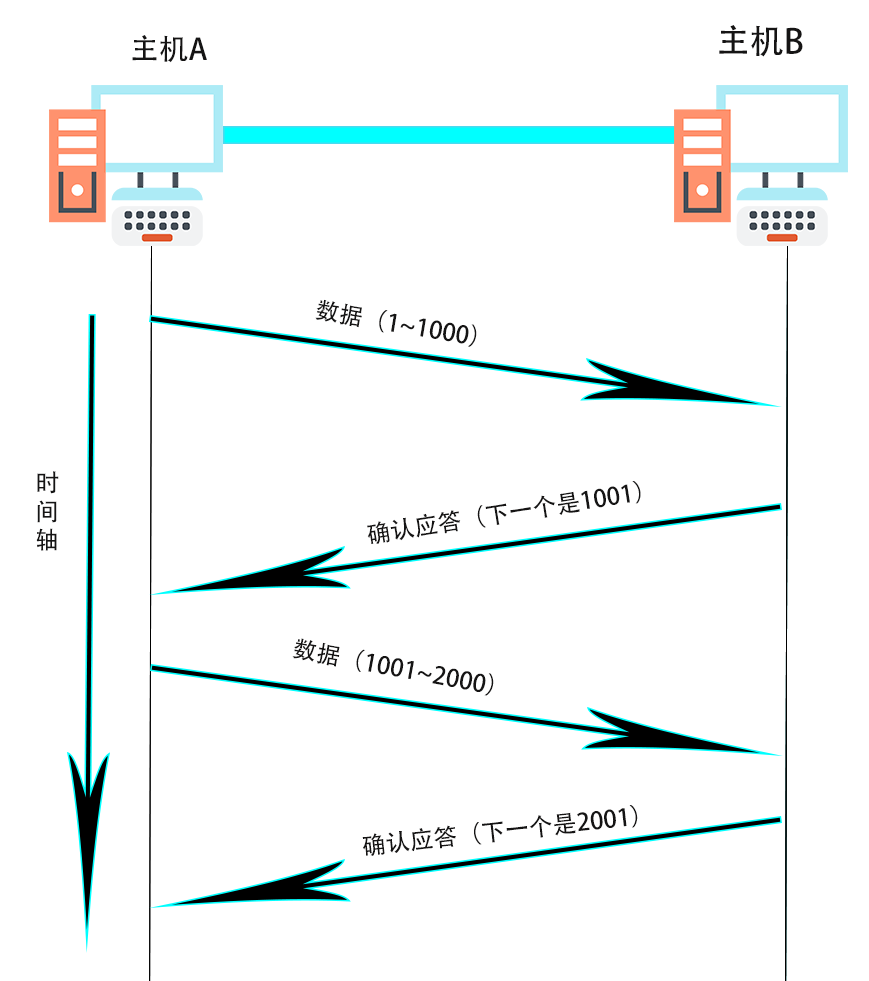
<style>
.page{position:relative;width:869px;height:981px;background:#ffffff}
.page>*{position:absolute;margin:0}
.t1{font:33.8px "AdobeHeitiStd-Regular";color:#151414}
.t2{font:29.4px "AdobeHeitiStd-Regular";color:#151414}
.t3{font:24px "AdobeHeitiStd-Regular";color:#151414}
</style>
<div class="page">
<p class="t1" style="left:719px;top:25px;width:84px;height:32px">主机B</p>
<p class="t2" style="left:132px;top:35px;width:75px;height:28px">主机A</p>
<p class="t3" style="left:315px;top:299px;width:162px;height:48px;rotate:10deg">数据（1~1000）</p>
<p class="t3" style="left:36px;top:471px;width:23px;height:80px">时<br>间<br>轴</p>
<p class="t3" style="left:367px;top:481px;width:274px;height:63px;rotate:-9deg">确认应答（下一个是1001）</p>
<p class="t3" style="left:292px;top:638px;width:202px;height:58px;rotate:11deg">数据（1001~2000）</p>
<p class="t3" style="left:362px;top:805px;width:276px;height:51px;rotate:-6deg">确认应答（下一个是2001）</p>
</div>
